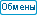
<style>
.page{position:relative;width:37px;height:15px;background:#ffffff}
.page>*{position:absolute;margin:0}
.t1{font:10px "ArialMT";letter-spacing:0.04em;color:#006699;scale:0.92 1}
</style>
<div class="page">
<p class="t1" style="left:2px;top:3px;width:33px;height:7px">Обмены</p>
</div>
